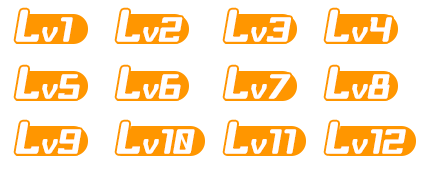
<style>
.page{position:relative;width:432px;height:174px;background:#ffffff}
.page>*{position:absolute;margin:0}
.t1{font:39.7px "BabyUniverseItalic";letter-spacing:-0.01em;color:#fffefe}
.t2{font:24.4px "BabyUniverseItalic";letter-spacing:0.05em;color:#fffefe}
.t3{font:30.6px "BabyUniverseItalic";letter-spacing:0.05em;color:#fffefe}
</style>
<div class="page">
<p class="t1" style="left:15px;top:9px;width:58px;height:33px">L<span class="t2">v</span><span class="t3">1</span></p>
<p class="t1" style="left:116px;top:9px;width:67px;height:33px">L<span class="t2">v</span><span class="t3">2</span></p>
<p class="t1" style="left:224px;top:9px;width:67px;height:33px">L<span class="t2">v</span><span class="t3">3</span></p>
<p class="t1" style="left:325px;top:9px;width:67px;height:33px">L<span class="t2">v</span><span class="t3">4</span></p>
<p class="t1" style="left:15px;top:66px;width:65px;height:33px">L<span class="t2">v</span><span class="t3">5</span></p>
<p class="t1" style="left:116px;top:66px;width:65px;height:33px">L<span class="t2">v</span><span class="t3">6</span></p>
<p class="t1" style="left:224px;top:66px;width:67px;height:33px">L<span class="t2">v</span><span class="t3">7</span></p>
<p class="t1" style="left:325px;top:66px;width:65px;height:33px">L<span class="t2">v</span><span class="t3">8</span></p>
<p class="t1" style="left:15px;top:121px;width:67px;height:33px">L<span class="t2">v</span><span class="t3">9</span></p>
<p class="t3" style="left:116px;top:121px;width:79px;height:33px"><span class="t1">L</span><span class="t2">v</span>10</p>
<p class="t3" style="left:224px;top:121px;width:73px;height:33px"><span class="t1">L</span><span class="t2">v</span>11</p>
<p class="t3" style="left:325px;top:121px;width:81px;height:33px"><span class="t1">L</span><span class="t2">v</span>12</p>
</div>
